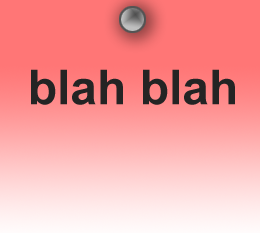
<style>
.page{position:relative;width:260px;height:233px;background:#ff7676}
.page>*{position:absolute;margin:0}
.t1{font:48px "Arial-BoldMT";color:#242424}
</style>
<div class="page">
<p class="t1" style="left:31px;top:69px;width:204px;height:36px">blah blah</p>
</div>
